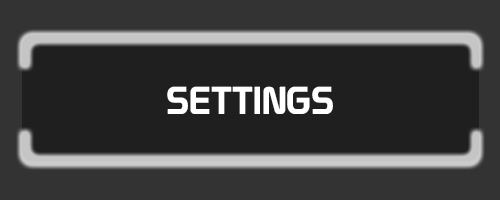
<style>
.page{position:relative;width:500px;height:200px;background:#1f1f1f}
.page>*{position:absolute;margin:0}
.t1{font:38px "Prototype";color:#ffffff}
</style>
<div class="page">
<p class="t1" style="left:167px;top:86px;width:166px;height:28px">SETTINGS</p>
</div>
